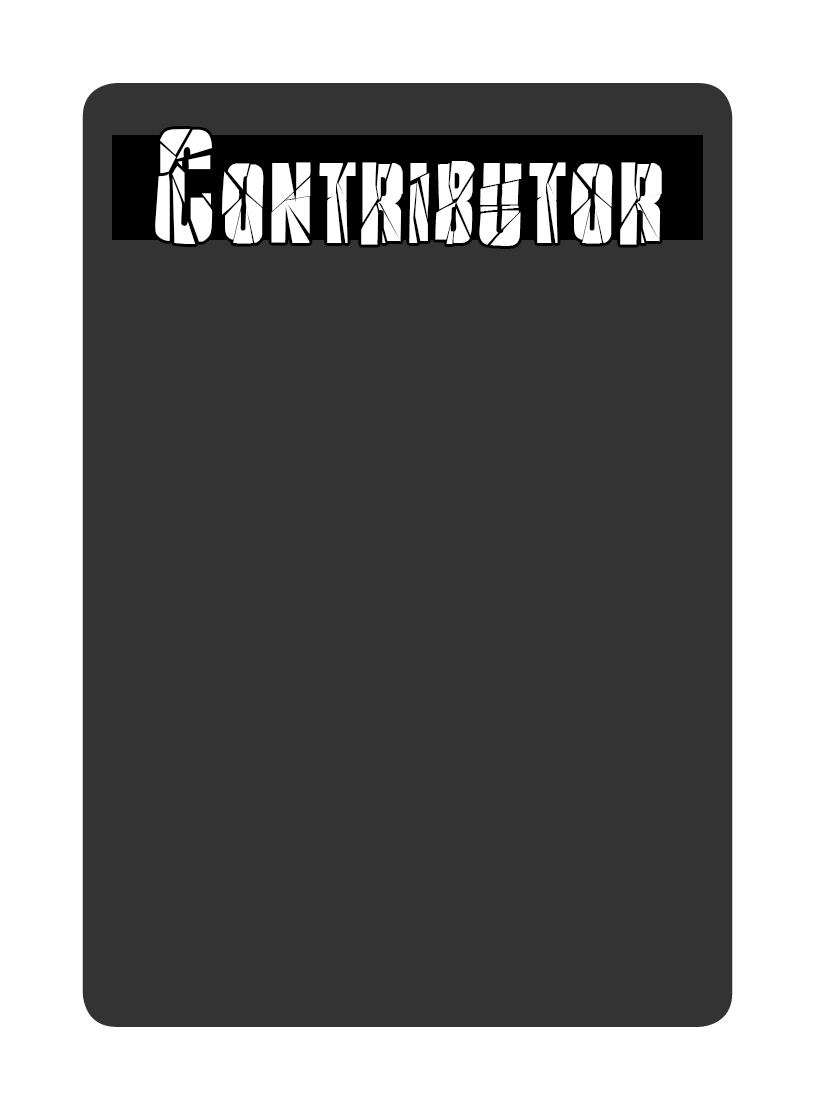
<style>
.page{position:relative;width:815px;height:1110px;background:#333333}
.page>*{position:absolute;margin:0}
.t1{font:125px "RupturedSans";color:#ffffff;font-variant:small-caps}
</style>
<div class="page">
<p class="t1" style="left:155px;top:129px;width:507px;height:117px">Contributor</p>
</div>
